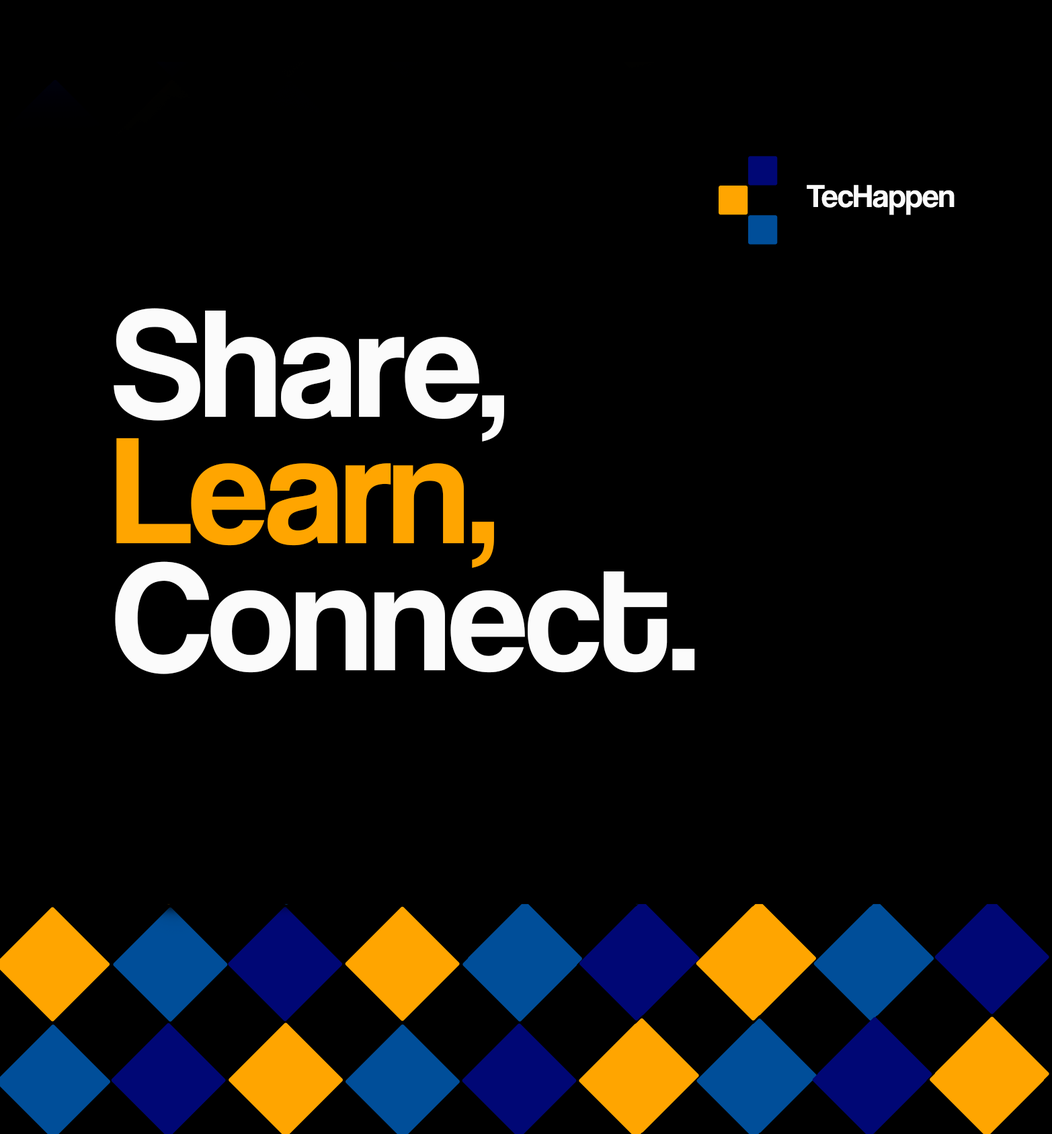
<style>
.page{position:relative;width:1052px;height:1134px;background:#000000}
.page>*{position:absolute;margin:0}
.t1{font:33.2px "CoolveticaRg-Regular";letter-spacing:-0.005em;color:#fbfbfb}
.t2{font:158.2px/126.6px "CoolveticaRg-Regular";letter-spacing:-0.005em;color:#fbfbfb}
.t3{font:158.2px/126.6px "CoolveticaRg-Regular";letter-spacing:-0.005em;color:#ffa500}
</style>
<div class="page">
<p class="t1" style="left:806px;top:185px;width:148px;height:30px">TecHappen</p>
<p class="t2" style="left:114px;top:308px;width:581px;height:366px">Share,<br><span class="t3">Learn,<br></span>Connect.</p>
</div>
